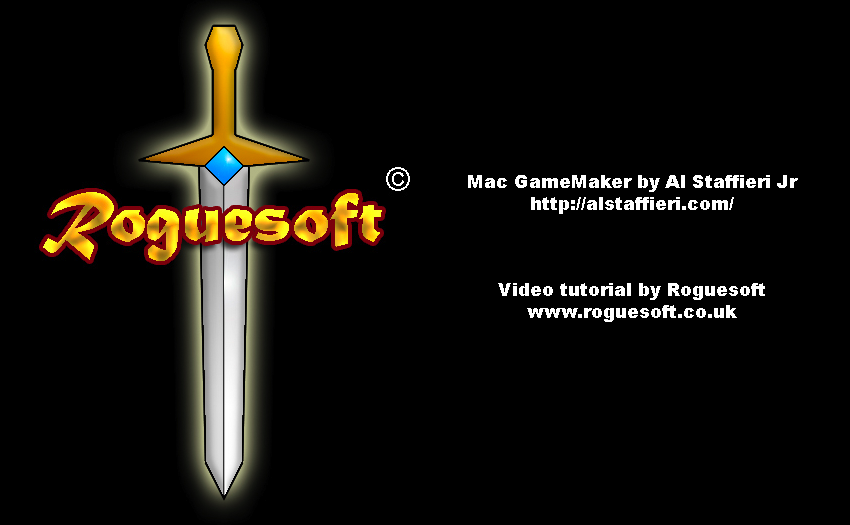
<style>
.page{position:relative;width:850px;height:525px;background:#000000}
.page>*{position:absolute;margin:0}
.t1{font:18px "Arial-Black";color:#ffffff}
</style>
<div class="page">
<p class="t1" style="left:468px;top:175px;width:330px;height:147px;text-align:center">Mac GameMaker by Al Staffieri Jr<br>http://alstaffieri.com/<br><br><br><br>Video tutorial by Roguesoft<br>www.roguesoft.co.uk</p>
</div>
